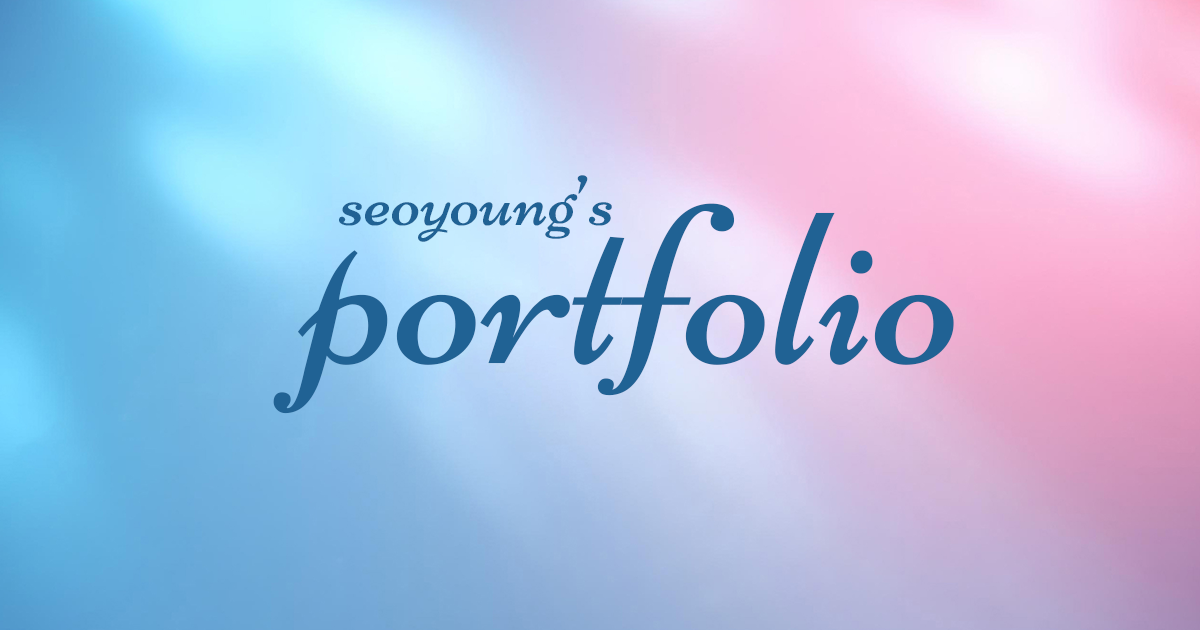
<style>
.page{position:relative;width:1200px;height:630px}
.page>*{position:absolute;margin:0}
.t1{font:77.1px "Niconne-Regular";color:#206294}
.t2{font:231.4px "Niconne-Regular";color:#206294}
</style>
<div class="page">
<p class="t1" style="left:339px;top:175px;width:273px;height:67px">seoyoung’s</p>
<p class="t2" style="left:273px;top:203px;width:681px;height:211px">portfolio</p>
</div>
